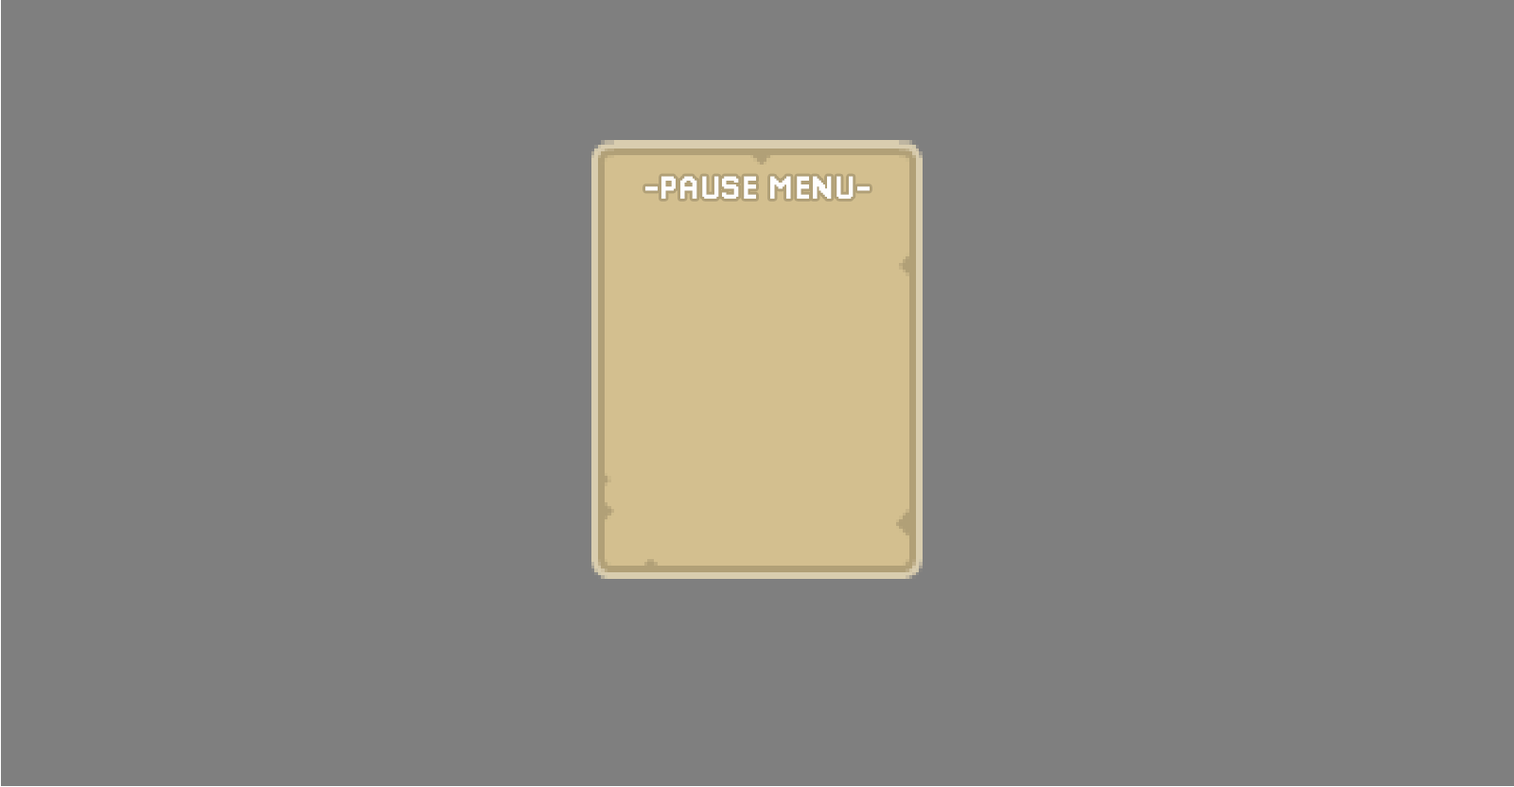
<style>
.page{position:relative;width:1514px;height:787px;background:#7f7f7f}
.page>*{position:absolute;margin:0}
.t1{font:32.2px "Pixellari";color:#fefefe}
</style>
<div class="page">
<p class="t1" style="left:645px;top:176px;width:225px;height:23px">-PAUSE MENU-</p>
</div>
